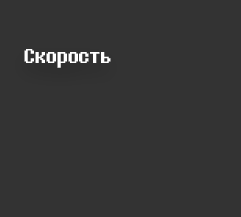
<style>
.page{position:relative;width:241px;height:217px;background:#333333}
.page>*{position:absolute;margin:0}
.t1{font:25px "Determination2";color:#ffffff}
</style>
<div class="page">
<p class="t1" style="left:24px;top:49px;width:87px;height:19px">Скорость</p>
</div>
